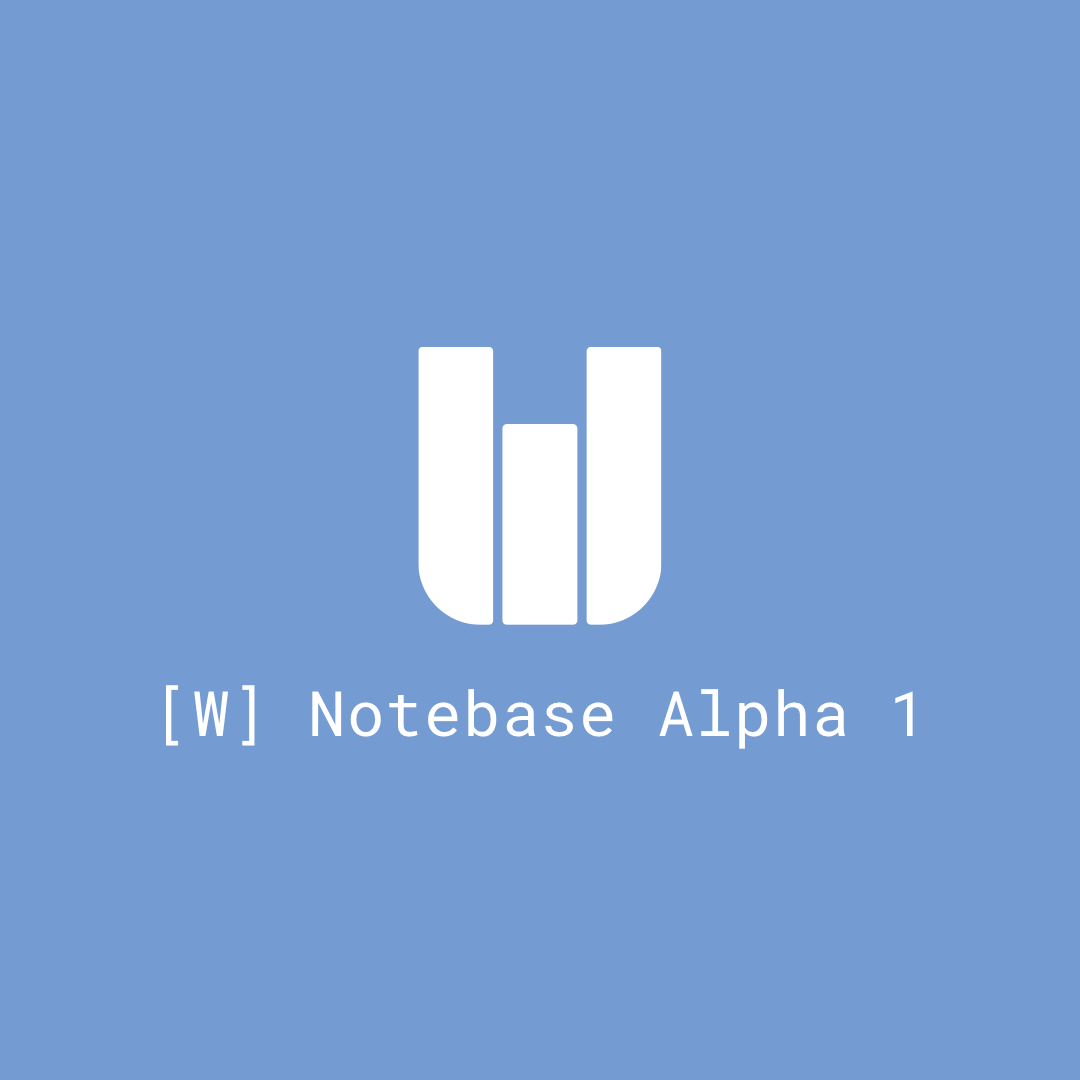
<style>
.page{position:relative;width:1080px;height:1080px;background:#749cd2}
.page>*{position:absolute;margin:0}
.t1{font:62.5px "RobotoMono-Regular";letter-spacing:0.02em;color:#ffffff}
</style>
<div class="page">
<p class="t1" style="left:166px;top:685px;width:747px;height:64px">[W] Notebase Alpha 1</p>
</div>
